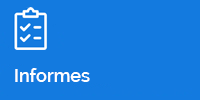
<style>
.page{position:relative;width:200px;height:100px;background:#137adf}
.page>*{position:absolute;margin:0}
.t1{font:18px "Raleway-SemiBold";color:#ffffff}
</style>
<div class="page">
<p class="t1" style="left:15px;top:68px;width:75px;height:14px">Informes</p>
</div>
